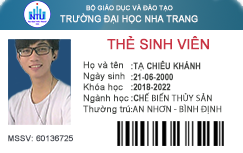
<style>
.page{position:relative;width:243px;height:153px;background:#ffffff}
.page>*{position:absolute;margin:0}
.t1{font:6.4px "ArialMT";color:#ffffff;font-weight:bold}
.t2{font:9.4px "ArialMT";color:#ffffff;font-weight:bold;scale:0.93 1}
.t3{font:14px "ArialMT";color:#c93344;font-weight:bold;scale:0.96 1}
.t4{font:9px "ArialMT";color:#474946;font-weight:bold}
.t5{font:9px "ArialNarrow-Bold";color:#474946;font-weight:bold}
.t6{font:9px "MyriadPro-Regular";color:#474946;font-weight:bold}
.t7{font:8px "ArialMT";color:#474b54;font-weight:bold}
</style>
<div class="page">
<p class="t1" style="left:86px;top:4px;width:87px;height:8px">BỘ GIÁO DỤC VÀ ĐÀO TẠO</p>
<p class="t2" style="left:60px;top:13px;width:138px;height:11px">TRƯỜNG ĐẠI HỌC NHA TRANG</p>
<p class="t3" style="left:107px;top:36px;width:102px;height:14px">THẺ SINH VIÊN</p>
<p class="t4" style="left:83px;top:61px;width:47px;height:53px">Họ và tên<br>Ngày sinh<br>Khóa học<br>Ngành học<br>Thường trú</p>
<p class="t5" style="left:131px;top:60px;width:91px;height:54px">:T<span class="t4">Ạ</span> CHIÊU KHÁNH<br>:21-06-2000<br>:2018-2022<br>:CH<span class="t6">Ế BIẾN THỦY SẢN<br>:AN NHƠN - BÌNH ĐỊNH</span></p>
<p class="t7" style="left:8px;top:135px;width:65px;height:7px">MSSV: 60136725</p>
</div>
